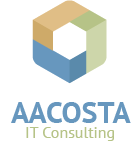
<style>
.page{position:relative;width:136px;height:151px;background:#ffffff}
.page>*{position:absolute;margin:0}
.t1{font:30px "PTSans-Bold";color:#6797be}
.t2{font:16px "PTSans-Regular";color:#b6c387}
</style>
<div class="page">
<p class="t1" style="left:11px;top:102px;width:120px;height:21px">AACOSTA</p>
<p class="t2" style="left:26px;top:127px;width:88px;height:14px">IT Consulting</p>
</div>
